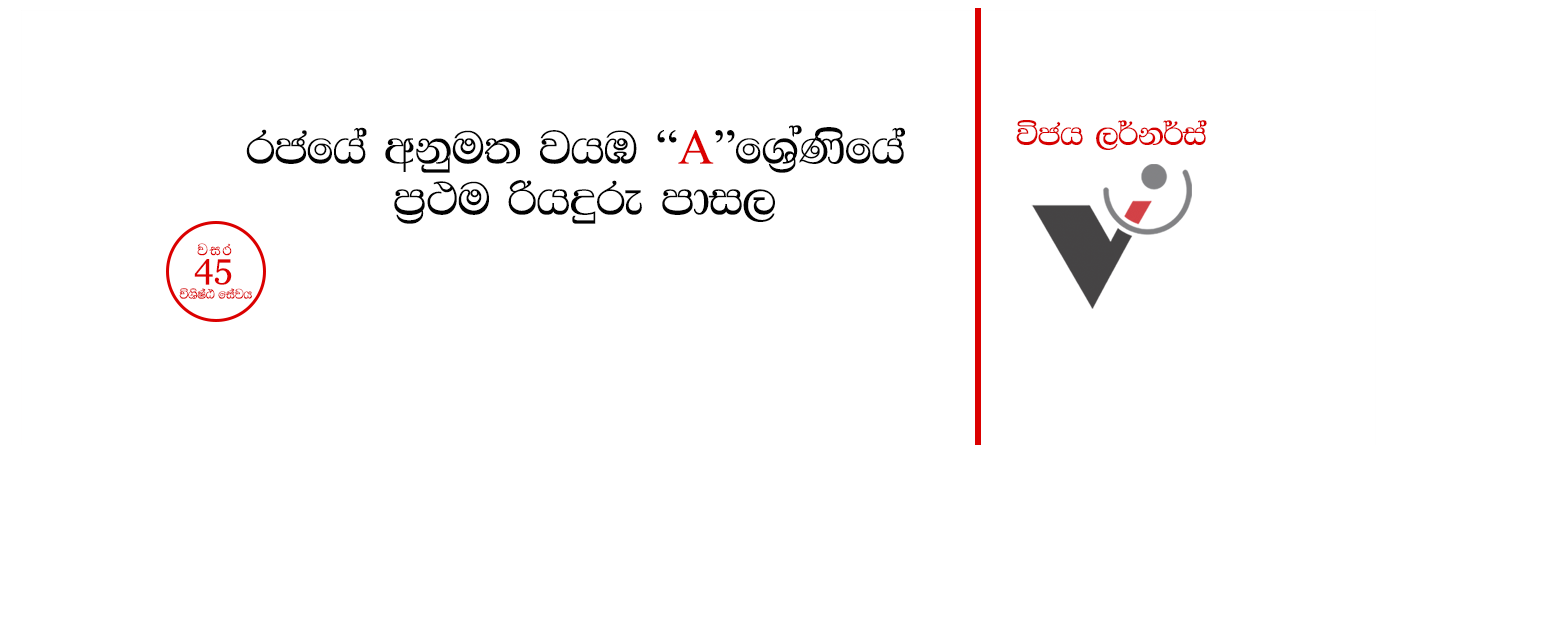
<style>
.page{position:relative;width:1544px;height:626px;background:#ffffff}
.page>*{position:absolute;margin:0}
.t1{font:49.5px/51px "FMBindumathix";color:#020202}
.t2{font:49.5px/51px "TimesNewRomanPSMT";color:#020202}
.t3{font:49.5px/51px "TimesNewRomanPSMT";color:#db0000}
.t4{font:34.1px "FMBindumathix";color:#d70000}
.t5{font:21.1px "FMArjunnx";letter-spacing:0.1em;color:#db0000}
.t6{font:35.8px "Vani";color:#db0000}
.t7{font:17.9px "FMArjunnx";color:#da0000}
</style>
<div class="page">
<p class="t1" style="left:246px;top:125px;width:659px;height:99px;text-align:center">rcfha wkqu; jhU <span class="t2">“</span><span class="t3">A</span><span class="t2">”</span>fY%AKsfha <br>m%:u ßhÿre mdi,</p>
<p class="t4" style="left:1016px;top:120px;width:191px;height:30px">úch ,¾k¾ia</p>
<p class="t5" style="left:197px;top:243px;width:35px;height:13px">jir</p>
<p class="t6" style="left:194px;top:259px;width:38px;height:26px">45</p>
<p class="t7" style="left:179px;top:288px;width:73px;height:11px">úYsIaG fiajh</p>
</div>
